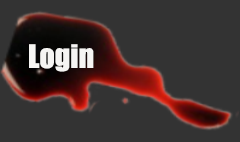
<style>
.page{position:relative;width:240px;height:142px;background:#333333}
.page>*{position:absolute;margin:0}
.t1{font:30px "Impact";color:#f6f5f3}
</style>
<div class="page">
<p class="t1" style="left:29px;top:44px;width:65px;height:28px">Login</p>
</div>
